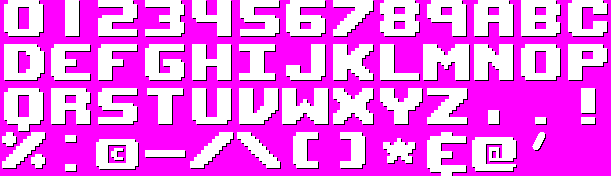
<style>
.page{position:relative;width:611px;height:176px;background:#ff00ff}
.page>*{position:absolute;margin:0}
.t1{font:72px "UpheavalPro-Regular";color:#ffffff}
.t2{font:68px "UpheavalPro-Regular";color:#ffffff}
.t3{font:67.9px "ChalkboardSE-Regular";color:#ffffff}
.t4{font:60px "UpheavalPro-Regular";color:#ffffff}
</style>
<div class="page">
<p class="t1" style="left:4px;top:0px;width:39px;height:36px">0</p>
<p class="t1" style="left:98px;top:0px;width:39px;height:36px">2</p>
<p class="t1" style="left:145px;top:0px;width:39px;height:36px">3</p>
<p class="t1" style="left:192px;top:0px;width:39px;height:36px">4</p>
<p class="t1" style="left:240px;top:0px;width:39px;height:36px">5</p>
<p class="t1" style="left:286px;top:0px;width:39px;height:36px">6</p>
<p class="t1" style="left:333px;top:0px;width:40px;height:36px">7</p>
<p class="t1" style="left:380px;top:0px;width:39px;height:36px">8</p>
<p class="t1" style="left:427px;top:0px;width:39px;height:36px">9</p>
<p class="t1" style="left:474px;top:0px;width:39px;height:36px">a</p>
<p class="t1" style="left:521px;top:0px;width:39px;height:36px">b</p>
<p class="t1" style="left:568px;top:0px;width:39px;height:36px">c</p>
<p class="t1" style="left:4px;top:44px;width:40px;height:36px">D</p>
<p class="t1" style="left:51px;top:44px;width:39px;height:36px">E</p>
<p class="t1" style="left:98px;top:44px;width:39px;height:36px">f</p>
<p class="t1" style="left:145px;top:44px;width:39px;height:36px">g</p>
<p class="t1" style="left:192px;top:44px;width:39px;height:36px">h</p>
<p class="t1" style="left:239px;top:44px;width:36px;height:36px">i</p>
<p class="t1" style="left:286px;top:44px;width:39px;height:36px">j</p>
<p class="t1" style="left:333px;top:44px;width:40px;height:36px">k</p>
<p class="t1" style="left:380px;top:44px;width:39px;height:36px">l</p>
<p class="t1" style="left:423px;top:44px;width:46px;height:36px">m</p>
<p class="t1" style="left:474px;top:44px;width:39px;height:36px">n</p>
<p class="t1" style="left:521px;top:44px;width:39px;height:36px">o</p>
<p class="t1" style="left:568px;top:44px;width:39px;height:36px">p</p>
<p class="t1" style="left:4px;top:88px;width:39px;height:43px">q</p>
<p class="t1" style="left:51px;top:88px;width:39px;height:36px">r</p>
<p class="t1" style="left:98px;top:88px;width:39px;height:36px">s</p>
<p class="t1" style="left:147px;top:88px;width:36px;height:36px">t</p>
<p class="t1" style="left:192px;top:88px;width:39px;height:36px">u</p>
<p class="t1" style="left:239px;top:88px;width:39px;height:36px">v</p>
<p class="t1" style="left:282px;top:88px;width:46px;height:36px">w</p>
<p class="t1" style="left:333px;top:88px;width:40px;height:36px">x</p>
<p class="t1" style="left:380px;top:88px;width:42px;height:36px">y</p>
<p class="t1" style="left:427px;top:88px;width:40px;height:36px">z</p>
<p class="t1" style="left:581px;top:88px;width:14px;height:36px">!</p>
<p class="t1" style="left:2px;top:132px;width:43px;height:36px">%</p>
<p class="t1" style="left:65px;top:135px;width:11px;height:36px">:</p>
<p class="t1" style="left:190px;top:132px;width:43px;height:36px">/</p>
<p class="t1" style="left:237px;top:132px;width:43px;height:36px">\</p>
<p class="t1" style="left:293px;top:132px;width:25px;height:36px">(</p>
<p class="t1" style="left:340px;top:132px;width:25px;height:36px">)</p>
<p class="t1" style="left:427px;top:132px;width:39px;height:44px">&amp;</p>
<p class="t2" style="left:472px;top:137px;width:44px;height:34px">@</p>
<p class="t3" style="left:532px;top:132px;width:13px;height:18px;rotate:180deg">‘</p>
<p class="t4" style="left:96px;top:139px;width:42px;height:30px">©</p>
<p class="t1" style="left:383px;top:138px;width:32px;height:25px">*</p>
</div>
